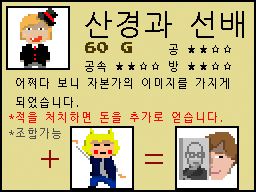
<style>
.page{position:relative;width:256px;height:192px;background:#e4db92}
.page>*{position:absolute;margin:0}
.t1{font:30px "NanumGothicCoding";color:#000000}
.t2{font:12px "PressStart2P";color:#4b3800}
.t3{font:11px "NanumGothicCoding";color:#000000}
.t4{font:11px "NanumGothicCoding";color:#ff0000}
.t5{font:11px "NanumGothicCoding";color:#4f4f4f}
.t6{font:36px "NanumGothicCoding";color:#900707}
</style>
<div class="page">
<p class="t1" style="left:85px;top:11px;width:159px;height:27px">산경과 선배</p>
<p class="t2" style="left:85px;top:42px;width:47px;height:11px">60 G</p>
<p class="t3" style="left:169px;top:44px;width:62px;height:11px">공 ★★☆☆</p>
<p class="t3" style="left:85px;top:61px;width:146px;height:11px">공속 ★★☆☆ 방 ★★☆☆</p>
<p class="t3" style="left:16px;top:78px;width:213px;height:30px">어쩌다 보니 자본가의 이미지를 가지게<br>되었습니다.</p>
<p class="t4" style="left:9px;top:112px;width:213px;height:11px">*적을 처치하면 돈을 추가로 얻습니다.</p>
<p class="t5" style="left:9px;top:128px;width:52px;height:11px">*조합가능</p>
<p class="t6" style="left:41px;top:150px;width:18px;height:18px">+</p>
<p class="t6" style="left:145px;top:154px;width:18px;height:10px">=</p>
</div>
